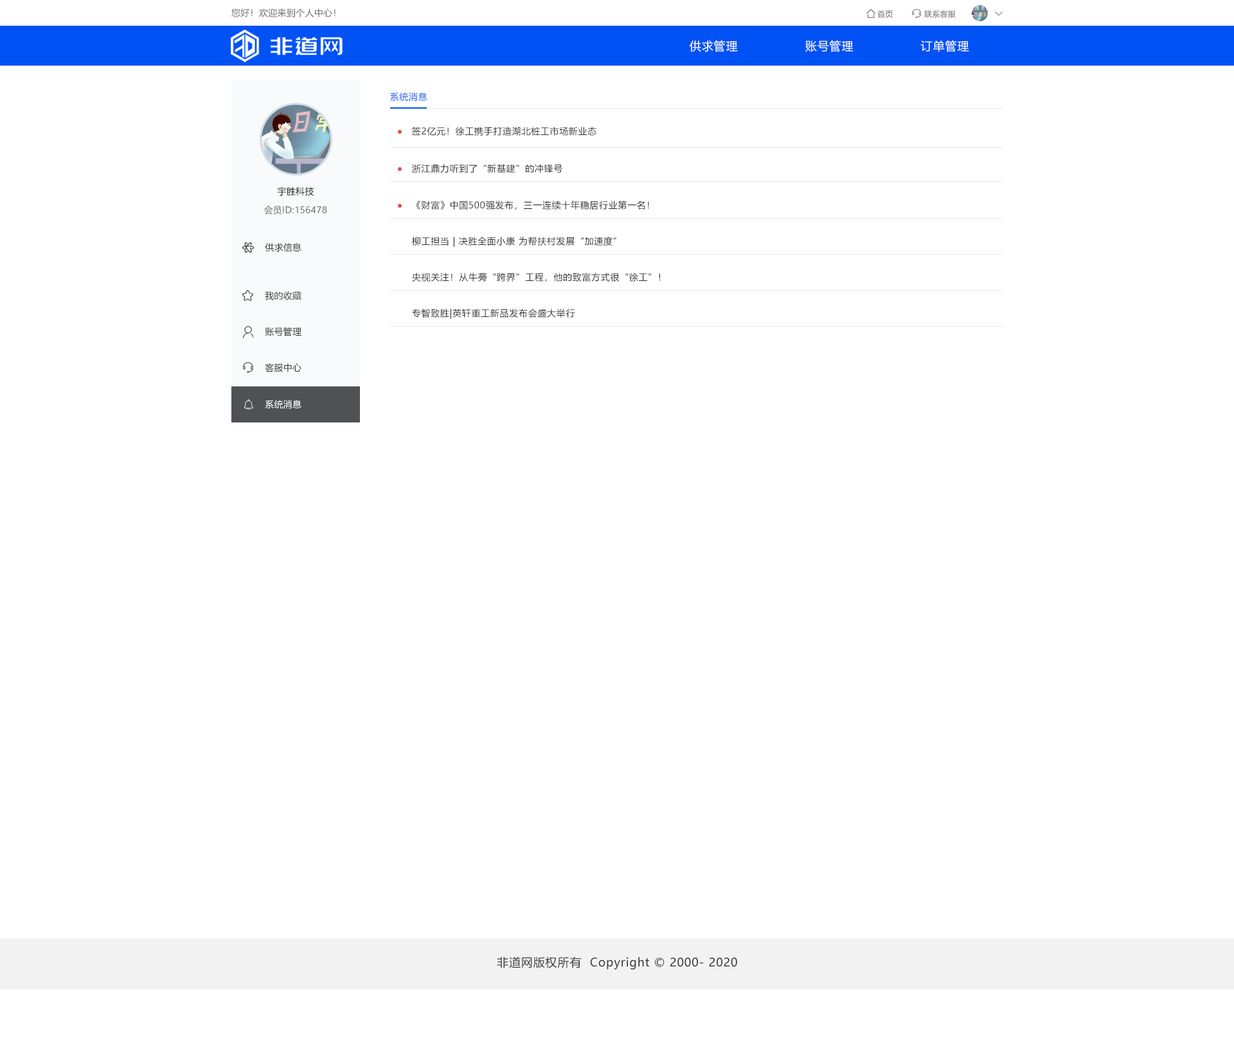
<style>
.page{position:relative;width:1234px;height:1050px;background:#ffffff}
.page>*{position:absolute;margin:0}
.t1{font:9px "MicrosoftYaHei";letter-spacing:0.022em;color:#666666}
.t2{font:7.7px "MicrosoftYaHei";letter-spacing:0.022em;color:#666666}
.t3{font:11.6px "MicrosoftYaHei";letter-spacing:0.05em;color:#ffffff}
.t4{font:9px "MicrosoftYaHei";letter-spacing:0.05em;color:#0152f5}
.t5{font:9px "MicrosoftYaHei";letter-spacing:0.05em;color:#333333}
.t6{font:9px "MicrosoftYaHei";letter-spacing:0.022em;color:#141414}
.t7{font:9px "MicrosoftYaHei";letter-spacing:0.022em;color:#333333}
.t8{font:9px "MicrosoftYaHei";letter-spacing:0.022em;color:#ffffff}
.t9{font:11.6px "MicrosoftYaHei";letter-spacing:0.05em;color:#333333}
</style>
<div class="page">
<p class="t1" style="left:231px;top:8px;width:105px;height:9px">您好！欢迎来到个人中心！</p>
<p class="t2" style="left:878px;top:10px;width:15px;height:8px">首页</p>
<p class="t2" style="left:924px;top:10px;width:32px;height:8px">联系客服</p>
<p class="t3" style="left:689px;top:40px;width:49px;height:12px">供求管理</p>
<p class="t3" style="left:806px;top:40px;width:48px;height:12px">账号管理</p>
<p class="t3" style="left:921px;top:40px;width:48px;height:12px">订单管理</p>
<p class="t4" style="left:390px;top:92px;width:38px;height:10px">系统消息</p>
<p class="t5" style="left:411px;top:127px;width:186px;height:9px">签2亿元！徐工携手打造湖北桩工市场新业态</p>
<p class="t5" style="left:411px;top:164px;width:152px;height:9px">浙江鼎力听到了“新基建”的冲锋号</p>
<p class="t6" style="left:277px;top:186px;width:37px;height:10px">宇胜科技</p>
<p class="t1" style="left:264px;top:206px;width:63px;height:9px">会员ID:156478</p>
<p class="t5" style="left:416px;top:201px;width:233px;height:9px">《财富》中国500强发布，三一连续十年稳居行业第一名！</p>
<p class="t7" style="left:265px;top:243px;width:37px;height:9px">供求信息</p>
<p class="t5" style="left:412px;top:237px;width:204px;height:10px">柳工担当 | 决胜全面小康 为帮扶村发展“加速度”</p>
<p class="t5" style="left:412px;top:273px;width:249px;height:9px">央视关注！从牛蒡“跨界”工程，他的致富方式很“徐工”！</p>
<p class="t7" style="left:265px;top:291px;width:37px;height:9px">我的收藏</p>
<p class="t5" style="left:412px;top:309px;width:163px;height:10px">专智致胜|英轩重工新品发布会盛大举行</p>
<p class="t7" style="left:265px;top:327px;width:37px;height:9px">账号管理</p>
<p class="t7" style="left:265px;top:363px;width:37px;height:9px">客服中心</p>
<p class="t8" style="left:265px;top:400px;width:37px;height:9px">系统消息</p>
<p class="t9" style="left:497px;top:956px;width:240px;height:13px">非道网版权所有  Copyright © 2000- 2020</p>
</div>
